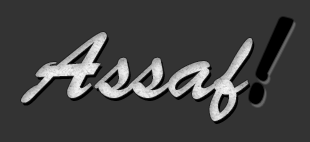
<style>
.page{position:relative;width:310px;height:142px;background:#333333}
.page>*{position:absolute;margin:0}
.t1{font:95.8px "BrushScriptStd"}
</style>
<div class="page">
<p class="t1" style="left:21px;top:32px;width:232px;height:89px">Assaf</p>
</div>
